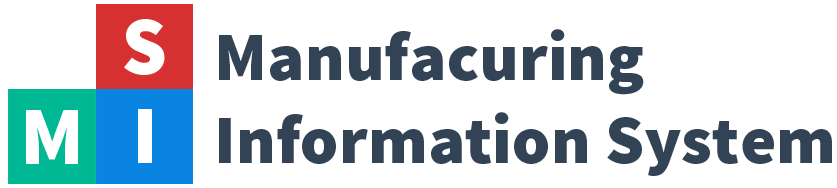
<style>
.page{position:relative;width:837px;height:188px;background:#ffffff}
.page>*{position:absolute;margin:0}
.t1{font:82px "SourceSansPro-Black";color:#ffffff}
.t2{font:68.8px "SourceSansPro-Black";color:#324355}
</style>
<div class="page">
<p class="t1" style="left:124px;top:19px;width:41px;height:56px">S</p>
<p class="t2" style="left:219px;top:29px;width:613px;height:147px">Manufacuring<br>Information System</p>
<p class="t1" style="left:26px;top:110px;width:52px;height:54px">M</p>
</div>
